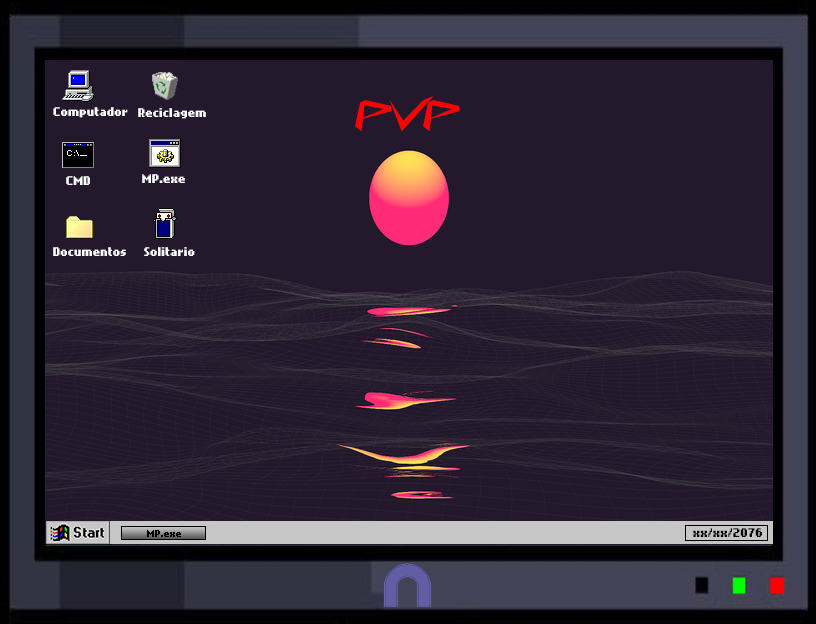
<style>
.page{position:relative;width:816px;height:624px;background:#23182c}
.page>*{position:absolute;margin:0}
.t1{font:40px "CyberwayRiders";color:#ff0000}
.t2{font:10px "NokiaCellphoneFC-Small";color:#fbfdff}
.t3{font:8px "NokiaCellphoneFC-Small";color:#000000}
.t4{font:10px "NokiaCellphoneFC-Small";color:#000000}
</style>
<div class="page">
<p class="t1" style="left:355px;top:96px;width:105px;height:36px">PVP</p>
<p class="t2" style="left:53px;top:107px;width:75px;height:11px">Computador</p>
<p class="t2" style="left:138px;top:108px;width:68px;height:11px">Reciclagem</p>
<p class="t2" style="left:142px;top:174px;width:43px;height:9px">MP.exe</p>
<p class="t2" style="left:66px;top:176px;width:24px;height:9px">CMD</p>
<p class="t2" style="left:53px;top:247px;width:73px;height:9px">Documentos</p>
<p class="t2" style="left:144px;top:247px;width:51px;height:9px">Solitario</p>
<p class="t3" style="left:146px;top:529px;width:36px;height:9px">MP.exe</p>
<p class="t4" style="left:693px;top:528px;width:69px;height:9px">xx/xx/2076</p>
</div>
